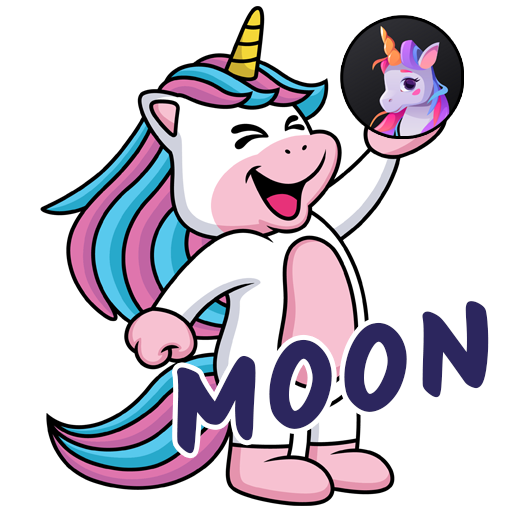
<style>
.page{position:relative;width:512px;height:512px;background:#ffffff}
.page>*{position:absolute;margin:0}
.t1{font:125px "Kalam-Bold";letter-spacing:0.025em;color:#2c265e;font-weight:bold}
</style>
<div class="page">
<p class="t1" style="left:177px;top:301px;width:312px;height:153px;rotate:-13deg">MOON</p>
</div>
